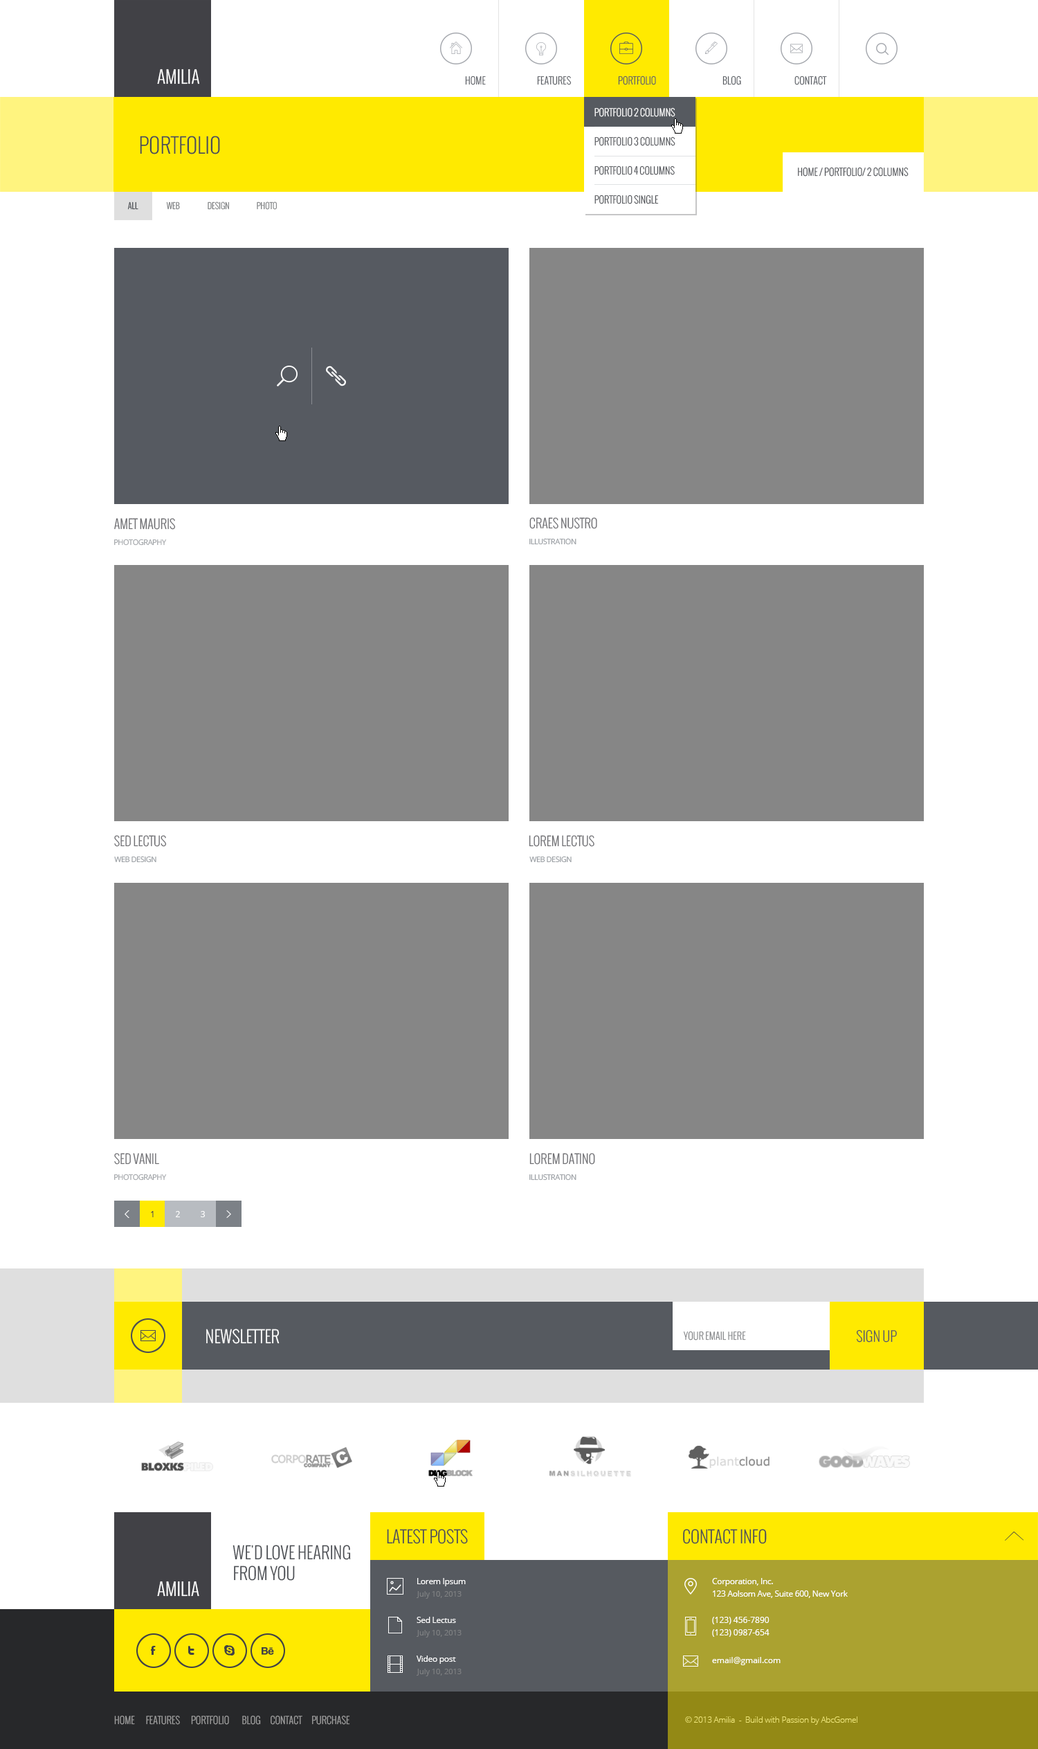
<style>
.page{position:relative;width:1038px;height:1749px;background:#ffffff}
.page>*{position:absolute;margin:0}
.t1{font:17.3px "Oswald-Light";color:#ffffff;text-transform:uppercase}
.t2{font:9.7px "Oswald-Light";color:#565a60;text-transform:uppercase}
.t3{font:9.7px/29.1px "Oswald-Light";color:#4b4e53;text-transform:uppercase}
.t4{font:9.7px/29.1px "Oswald-Light";color:#ffffff;text-transform:uppercase}
.t5{font:20.8px "Oswald-Light";color:#4b4e53;text-transform:uppercase}
.t6{font:9.7px "Oswald-Light";color:#4b4e53;text-transform:uppercase}
.t7{font:8.3px "Oswald-Light";color:#4b4e53;text-transform:uppercase}
.t8{font:8.3px "Oswald-Light";color:#7e8082;text-transform:uppercase}
.t9{font:12.5px "Oswald-Light";color:#6f6f73;text-transform:uppercase}
.t10{font:7.6px "OpenSans";letter-spacing:-0.05em;color:#9fa2a6;text-transform:uppercase}
.t11{font:7.6px "OpenSans";letter-spacing:-0.05em;color:#979ca1;text-transform:uppercase}
.t12{font:8.3px "OpenSans";color:#414146}
.t13{font:8.3px "OpenSans";color:#ffffff}
.t14{font:16.6px "Oswald-Light";color:#ffffff}
.t15{font:9.7px "Oswald-Light";letter-spacing:0.005em;color:#7e8082;text-transform:uppercase}
.t16{font:13.8px "Oswald-Light";color:#565a60}
.t17{font:16.6px "Oswald-Light";color:#4b4e53}
.t18{font:16.6px/20.8px "Oswald-Light";color:#4b4e53;text-transform:uppercase}
.t19{font:8.3px/12.5px "OpenSans";letter-spacing:-0.025em;color:#ffffff}
.t20{font:7.6px "OpenSans";color:#7e8082}
.t21{font:8.3px "OpenSans";letter-spacing:-0.025em;color:#ffffff}
.t22{font:8.3px/12.5px "OpenSans";color:#ffffff}
.t23{font:9.7px "Oswald-Light";color:#a1a1a1}
.t24{font:8.3px "OpenSans-Light";letter-spacing:-0.025em;color:#eee575}
</style>
<div class="page">
<p class="t1" style="left:157px;top:69px;width:42px;height:15px">AMILIA</p>
<p class="t2" style="left:465px;top:75px;width:21px;height:10px">Home</p>
<p class="t2" style="left:537px;top:75px;width:35px;height:10px">features</p>
<p class="t2" style="left:618px;top:75px;width:38px;height:10px">PORTFOLIO</p>
<p class="t2" style="left:723px;top:75px;width:18px;height:10px">BLOG</p>
<p class="t2" style="left:795px;top:75px;width:32px;height:10px">CONTACT</p>
<p class="t3" style="left:595px;top:107px;width:81px;height:97px;text-align:justify"><span class="t4">Portfolio 2 columns<br></span>Portfolio 3 columns<br>Portfolio 4 columns<br>Portfolio single</p>
<p class="t5" style="left:140px;top:136px;width:80px;height:18px">PorTFOLIO</p>
<p class="t6" style="left:798px;top:167px;width:111px;height:10px">home / portfolio/ 2 columns</p>
<p class="t7" style="left:127px;top:201px;width:11px;height:9px">All</p>
<p class="t8" style="left:166px;top:201px;width:14px;height:9px">Web</p>
<p class="t8" style="left:208px;top:201px;width:21px;height:9px">Design</p>
<p class="t8" style="left:257px;top:201px;width:20px;height:9px">Photo</p>
<p class="t9" style="left:114px;top:518px;width:62px;height:12px">Amet Mauris</p>
<p class="t9" style="left:530px;top:517px;width:67px;height:12px">Craes Nustro</p>
<p class="t10" style="left:114px;top:539px;width:53px;height:7px">photography</p>
<p class="t11" style="left:530px;top:538px;width:47px;height:7px"><span class="t10"><br></span>illustration</p>
<p class="t9" style="left:114px;top:835px;width:53px;height:12px">Sed Lectus</p>
<p class="t9" style="left:529px;top:835px;width:66px;height:12px">Lorem Lectus</p>
<p class="t11" style="left:114px;top:856px;width:42px;height:7px"><span class="t10"><br></span>web design</p>
<p class="t11" style="left:530px;top:856px;width:42px;height:7px"><span class="t10"><br></span>web design</p>
<p class="t9" style="left:114px;top:1153px;width:45px;height:11px">SeD VaNiL</p>
<p class="t9" style="left:530px;top:1153px;width:65px;height:11px">LOREM DAtINo</p>
<p class="t10" style="left:114px;top:1173px;width:53px;height:7px">photography</p>
<p class="t11" style="left:530px;top:1173px;width:47px;height:7px"><span class="t10"><br></span>illustration</p>
<p class="t12" style="left:151px;top:1211px;width:3px;height:6px">1</p>
<p class="t13" style="left:176px;top:1211px;width:4px;height:6px">2</p>
<p class="t13" style="left:201px;top:1211px;width:4px;height:6px">3</p>
<p class="t14" style="left:206px;top:1329px;width:74px;height:15px">NEWSLETTER</p>
<p class="t15" style="left:683px;top:1331px;width:63px;height:9px">Your email here</p>
<p class="t16" style="left:856px;top:1329px;width:41px;height:13px">SIGN UP</p>
<p class="t17" style="left:387px;top:1529px;width:81px;height:15px">LATEST POSTS</p>
<p class="t17" style="left:683px;top:1529px;width:84px;height:15px">CONTACT INFO</p>
<p class="t18" style="left:233px;top:1545px;width:118px;height:36px">we'd love hearing <br>from you</p>
<p class="t19" style="left:417px;top:1578px;width:49px;height:8px">Lorem Ipsum<br>ipsumage post</p>
<p class="t19" style="left:712px;top:1578px;width:136px;height:20px">Corporation, Inc.<br>123 Aolsom Ave, Suite 600, New York</p>
<p class="t1" style="left:157px;top:1581px;width:42px;height:15px">AMILIA</p>
<p class="t20" style="left:417px;top:1591px;width:45px;height:8px">July 10, 2013</p>
<p class="t21" style="left:417px;top:1617px;width:39px;height:6px">Sed Lectus</p>
<p class="t22" style="left:712px;top:1617px;width:58px;height:20px">(123) 456-7890<br>(123) 0987-654</p>
<p class="t20" style="left:417px;top:1630px;width:45px;height:7px">July 10, 2013</p>
<p class="t21" style="left:417px;top:1655px;width:39px;height:9px">Video post</p>
<p class="t13" style="left:712px;top:1657px;width:69px;height:8px">email@gmail.com</p>
<p class="t20" style="left:417px;top:1668px;width:45px;height:8px">July 10, 2013</p>
<p class="t23" style="left:114px;top:1715px;width:236px;height:10px">HOME       FEATURES       PORTFOLIO        BLOG      CONTACT      PURCHASE</p>
<p class="t24" style="left:685px;top:1716px;width:173px;height:9px">© 2013 Amilia  -  Build with Passion by AbcGomel</p>
</div>
